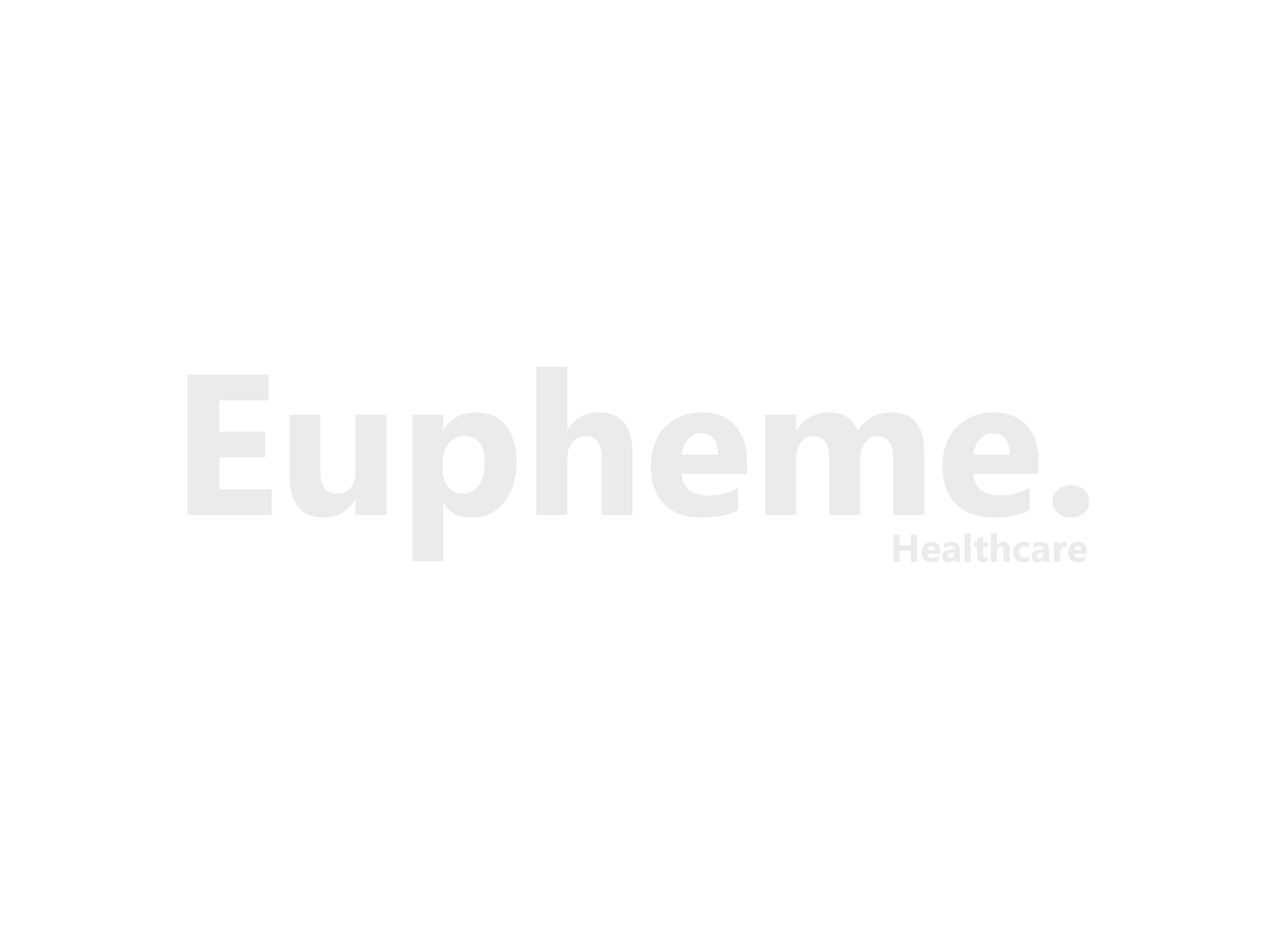
<style>
.page{position:relative;width:1261px;height:946px;background:#ffffff}
.page>*{position:absolute;margin:0}
.t1{font:38.9px "MicrosoftPhagsPa-Bold";color:#ebebeb}
.t2{font:200.2px "MicrosoftPhagsPa-Bold";color:#ebebeb}
</style>
<div class="page">
<p class="t1" style="left:188px;top:366px;width:902px;height:197px;text-align:center"><span class="t2">Eupheme.<br>                                                                  </span>Healthcare</p>
</div>
